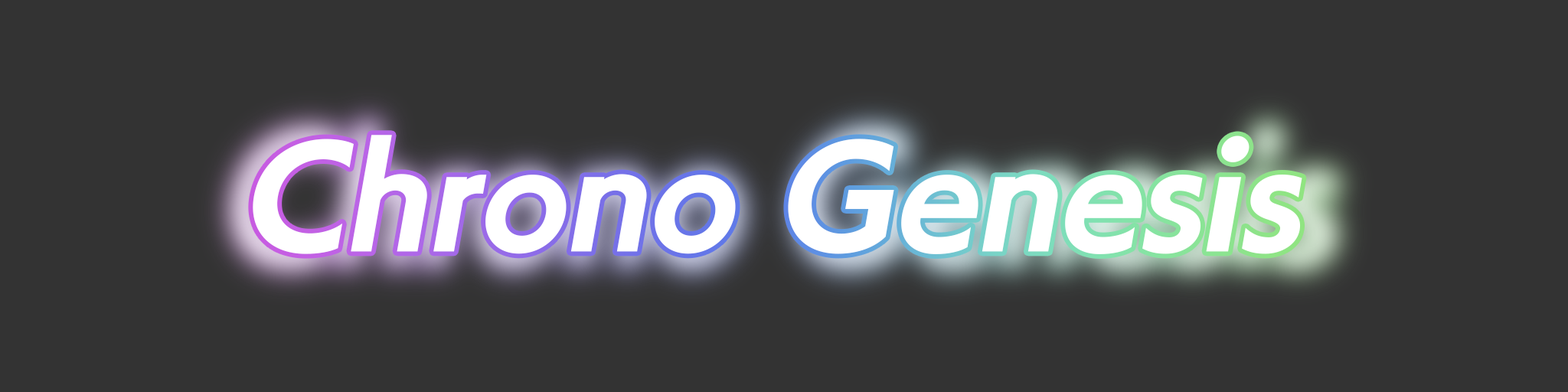
<style>
.page{position:relative;width:1568px;height:392px;background:#333333}
.page>*{position:absolute;margin:0}
.t1{font:130.2px "UMAE_UDKakugo_SmallPr6-E";letter-spacing:-0.005em;color:#ffffff;font-style:italic}
</style>
<div class="page">
<p class="t1" style="left:253px;top:135px;width:1049px;height:119px">Chrono Genesis</p>
</div>
